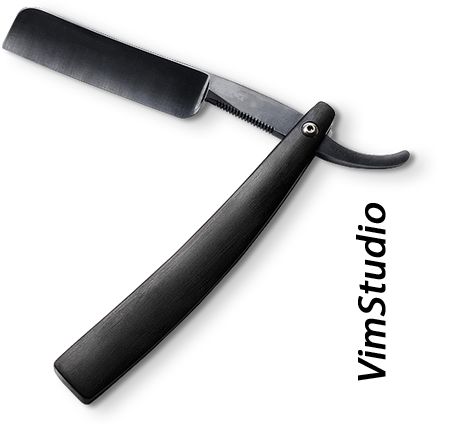
<style>
.page{position:relative;width:460px;height:426px;background:#ffffff}
.page>*{position:absolute;margin:0}
.t1{font:40px "MyriadPro-Regular";color:#000000;font-weight:bold;font-style:italic}
</style>
<div class="page">
<p class="t1" style="left:356px;top:203px;width:30px;height:178px;rotate:-90deg">VimStudio</p>
</div>
